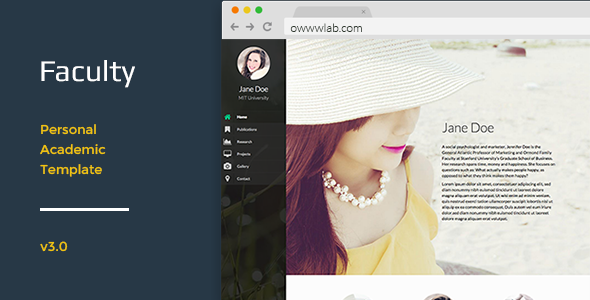
<style>
.page{position:relative;width:590px;height:300px;background:#273846}
.page>*{position:absolute;margin:0}
.t1{font:12px "Lato-Light";color:#303a30}
.t2{font:30px "Play";color:#ffffff}
.t3{font:13px/20px "Montserrat-Regular";color:#f1c40f}
.t4{font:13px "Montserrat-Regular";color:#f1c40f}
</style>
<div class="page">
<p class="t1" style="left:290px;top:23px;width:72px;height:9px">owwwlab.com</p>
<p class="t2" style="left:41px;top:60px;width:94px;height:28px">Faculty</p>
<p class="t3" style="left:40px;top:124px;width:66px;height:53px;text-align:right">Personal<br> Academic<br>Template</p>
<p class="t4" style="left:40px;top:241px;width:28px;height:11px">v3.0</p>
</div>
